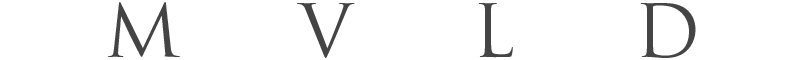
<style>
.page{position:relative;width:800px;height:60px;background:#ffffff}
.page>*{position:absolute;margin:0}
.t1{font:72px "TrajanPro-Regular";letter-spacing:1.66em;color:#444444}
</style>
<div class="page">
<p class="t1" style="left:108px;top:2px;width:588px;height:56px">MVLD</p>
</div>
